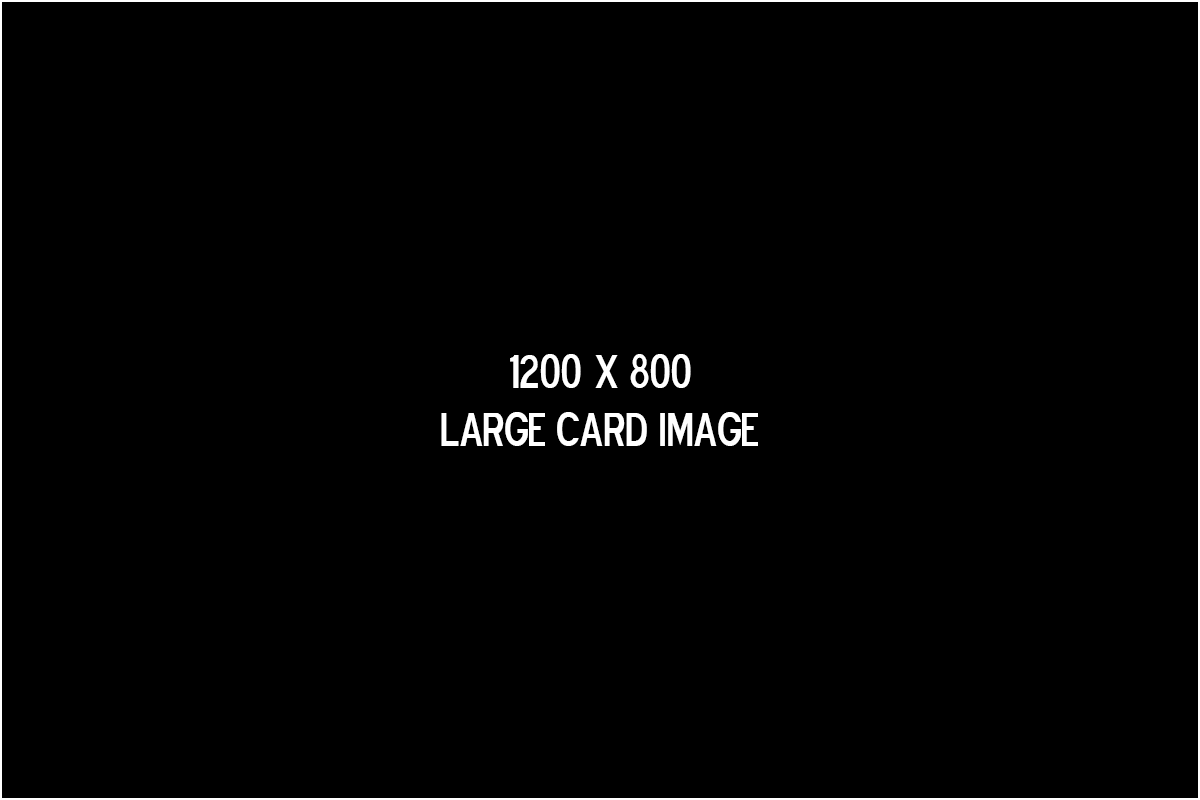
<style>
.page{position:relative;width:1200px;height:800px;background:#000000}
.page>*{position:absolute;margin:0}
.t1{font:48px "BlueHighwayDType";color:#ffffff}
</style>
<div class="page">
<p class="t1" style="left:441px;top:354px;width:317px;height:92px;text-align:center">1200 x 800<br>LARGE CARD IMAGE</p>
</div>
